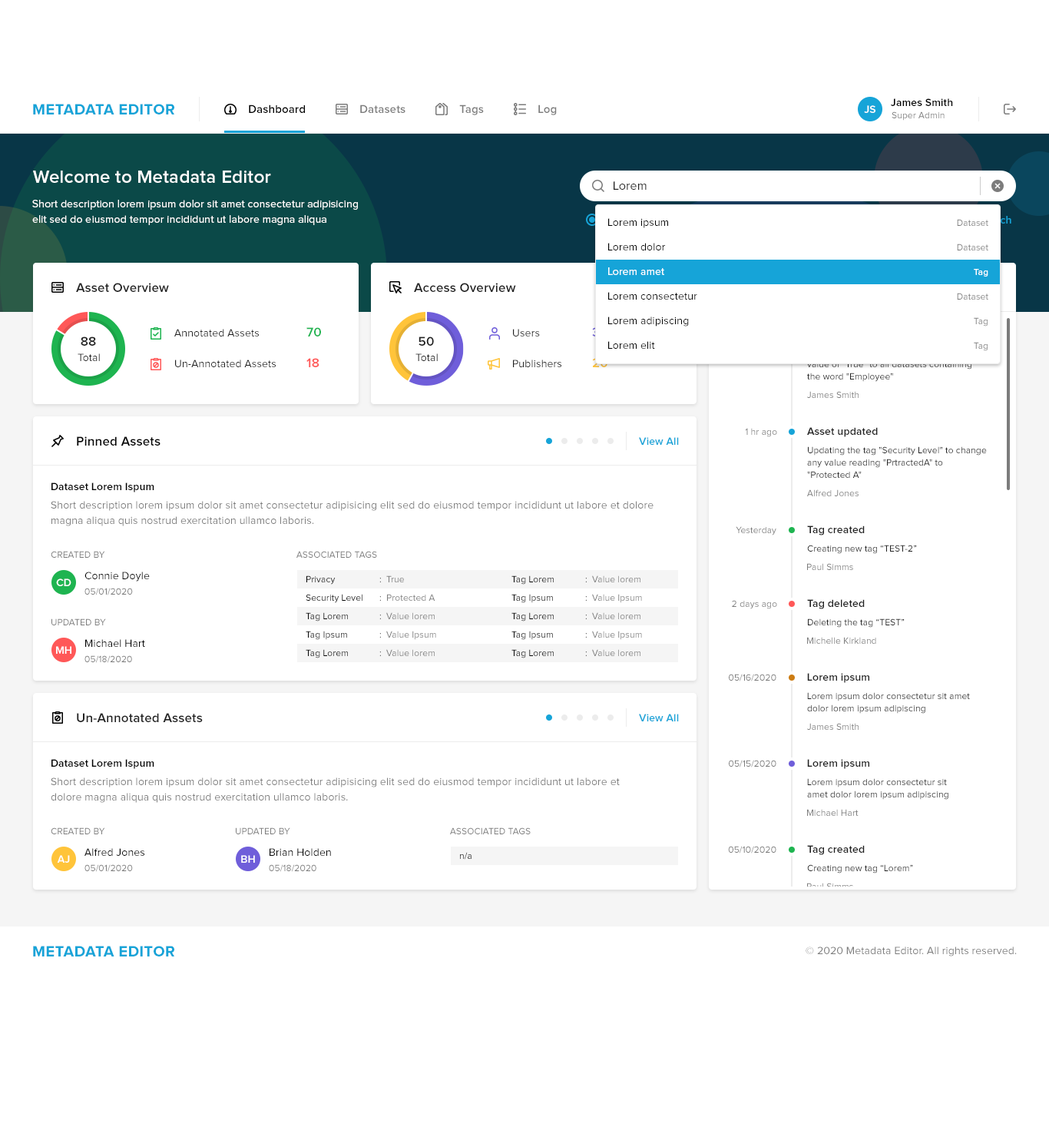
<style>
.page{position:relative;width:1049px;height:1137px;background:#ffffff}
.page>*{position:absolute;margin:0}
.t1{font:10.8px "ProximaNova-Semibold";letter-spacing:0.01em;color:#000000}
.t2{font:15.4px "ProximaNova-Bold";letter-spacing:0.025em;color:#16a4d8;text-transform:uppercase}
.t3{font:11.5px "ProximaNova-Semibold";letter-spacing:0.01em;color:#000000}
.t4{font:11.5px "ProximaNova-Semibold";letter-spacing:0.01em;color:#7c7c7c}
.t5{font:10.8px "ProximaNova-Semibold";letter-spacing:0.01em;color:#ffffff}
.t6{font:9.2px "ProximaNova-Regular";letter-spacing:0.01em;color:#7c7c7c}
.t7{font:18.4px "ProximaNova-Semibold";letter-spacing:0.01em;color:#ffffff}
.t8{font:12.3px "ProximaNova-Regular";letter-spacing:0.01em;color:#212121}
.t9{font:10.8px/15.4px "ProximaNova-Regular";letter-spacing:0.01em;color:#ffffff}
.t10{font:10.8px/24.6px "ProximaNova-Regular";letter-spacing:0.01em;color:#000000}
.t11{font:9.2px/24.6px "ProximaNova-Regular";letter-spacing:0.01em;color:#7c7c7c}
.t12{font:10.8px "ProximaNova-Regular";letter-spacing:0.01em;color:#ffffff}
.t13{font:9.2px "ProximaNova-Regular";letter-spacing:0.01em;color:#ffffff}
.t14{font:13.1px "ProximaNova-Semibold";letter-spacing:0.01em;color:#212121}
.t15{font:10.8px/30.7px "ProximaNova-Regular";letter-spacing:0.01em;color:#212121}
.t16{font:13.1px/30.7px "ProximaNova-Semibold";letter-spacing:0.01em;color:#1eb450}
.t17{font:13.1px/30.7px "ProximaNova-Semibold";letter-spacing:0.01em;color:#ff5858}
.t18{font:13.1px/30.7px "ProximaNova-Semibold";letter-spacing:0.01em;color:#ffffff}
.t19{font:10.8px "ProximaNova-Regular";letter-spacing:0.01em;color:#212121}
.t20{font:9.2px/12.3px "ProximaNova-Regular";letter-spacing:0.01em}
.t21{font:13.1px "ProximaNova-Semibold";letter-spacing:0.01em;color:#000000}
.t22{font:10.8px "ProximaNova-Semibold";letter-spacing:0.01em;color:#16a4d8}
.t23{font:10.8px "ProximaNova-Semibold";letter-spacing:0.01em;color:#212121}
.t24{font:9.2px/12.3px "ProximaNova-Regular";letter-spacing:0.01em;color:#212121}
.t25{font:10.8px/15.4px "ProximaNova-Regular";letter-spacing:0.01em;color:#7c7c7c}
.t26{font:9.2px "ProximaNova-Regular";letter-spacing:0.01em;color:#212121}
.t27{font:9.2px "ProximaNova-Regular";letter-spacing:0.01em;color:#7c7c7c;text-transform:uppercase}
.t28{font:10.8px "ProximaNova-Semibold";letter-spacing:0.01em;color:#ffffff;text-transform:uppercase}
.t29{font:10.8px "ProximaNova-Regular";letter-spacing:0.01em;color:#000000}
.t30{font:9.2px/18.4px "ProximaNova-Regular";letter-spacing:0.01em;color:#000000}
.t31{font:9.2px/18.4px "ProximaNova-Regular";letter-spacing:0.01em}
.t32{font:9.2px/18.4px "ProximaNova-Regular";letter-spacing:0.01em;color:#7c7c7c}
.t33{font:9.2px "ProximaNova-Regular";letter-spacing:0.01em}
.t34{font:10.8px "ProximaNova-Regular";letter-spacing:0.01em;color:#7c7c7c}
</style>
<div class="page">
<p class="t1" style="left:891px;top:98px;width:62px;height:8px">James Smith</p>
<p class="t2" style="left:33px;top:104px;width:141px;height:10px">Metadata Editor</p>
<p class="t3" style="left:249px;top:104px;width:56px;height:9px">Dashboard</p>
<p class="t4" style="left:360px;top:104px;width:46px;height:9px">Datasets</p>
<p class="t4" style="left:459px;top:104px;width:25px;height:11px">Tags</p>
<p class="t4" style="left:538px;top:104px;width:19px;height:11px">Log</p>
<p class="t5" style="left:864px;top:105px;width:12px;height:8px">JS</p>
<p class="t6" style="left:892px;top:111px;width:53px;height:10px">Super Admin</p>
<p class="t7" style="left:33px;top:170px;width:238px;height:13px">Welcome to Metadata Editor</p>
<p class="t8" style="left:614px;top:181px;width:33px;height:9px">Lorem</p>
<p class="t9" style="left:32px;top:200px;width:326px;height:25px">Short description lorem ipsum dolor sit amet consectetur adipisicing <br>elit sed do eiusmod tempor incididunt ut labore magna aliqua</p>
<p class="t10" style="left:608px;top:218px;width:89px;height:131px">Lorem ipsum<br>Lorem dolor<br>Lorem amet<br>Lorem consectetur<br>Lorem adipiscing<br>Lorem elit</p>
<p class="t11" style="left:957px;top:219px;width:31px;height:132px;text-align:right">Dataset<br>Dataset<br>Tag<br>Dataset<br>Tag<br>Tag</p>
<p class="t12" style="left:608px;top:267px;width:56px;height:8px">Lorem amet</p>
<p class="t13" style="left:974px;top:269px;width:14px;height:7px">Tag</p>
<p class="t14" style="left:76px;top:283px;width:93px;height:9px">Asset Overview</p>
<p class="t14" style="left:414px;top:283px;width:102px;height:9px">Access Overview</p>
<p class="t15" style="left:174px;top:329px;width:102px;height:38px">Annotated Assets<br>Un-Annotated Assets</p>
<p class="t16" style="left:306px;top:327px;width:15px;height:40px">70<br><span class="t17">18</span></p>
<p class="t15" style="left:513px;top:329px;width:48px;height:38px">Users<br>Publishers</p>
<p class="t18" style="left:592px;top:327px;width:15px;height:40px">30<br>20</p>
<p class="t14" style="left:81px;top:336px;width:15px;height:10px">88</p>
<p class="t14" style="left:419px;top:336px;width:15px;height:10px">50</p>
<p class="t19" style="left:78px;top:353px;width:22px;height:8px">Total</p>
<p class="t19" style="left:415px;top:353px;width:23px;height:8px">Total</p>
<p class="t20" style="left:807px;top:348px;width:169px;height:34px">Applied tag type called "Privacy" with the <br>value of "True" to all datasets containing <br>the word "Employee"</p>
<p class="t6" style="left:807px;top:391px;width:52px;height:7px">James Smith</p>
<p class="t21" style="left:77px;top:436px;width:84px;height:9px">Pinned Assets</p>
<p class="t22" style="left:639px;top:437px;width:40px;height:8px">View All</p>
<p class="t6" style="left:745px;top:428px;width:32px;height:9px">1 hr ago</p>
<p class="t23" style="left:807px;top:427px;width:71px;height:10px">Asset updated</p>
<p class="t24" style="left:807px;top:446px;width:180px;height:32px">Updating the tag "Security Level" to change <br>any value reading "PrtractedA" to <br>"Protected A"</p>
<p class="t1" style="left:51px;top:482px;width:103px;height:10px">Dataset Lorem Ispum</p>
<p class="t6" style="left:807px;top:489px;width:52px;height:7px">Alfred Jones</p>
<p class="t25" style="left:51px;top:501px;width:603px;height:25px">Short description lorem ipsum dolor sit amet consectetur adipisicing elit sed do eiusmod tempor incididunt ut labore et dolore <br>magna aliqua quis nostrud exercitation ullamco laboris.</p>
<p class="t6" style="left:736px;top:526px;width:40px;height:9px">Yesterday</p>
<p class="t23" style="left:807px;top:525px;width:58px;height:10px">Tag created</p>
<p class="t26" style="left:807px;top:545px;width:110px;height:9px">Creating new tag “TEST-2”</p>
<p class="t27" style="left:51px;top:551px;width:54px;height:7px">Created by</p>
<p class="t27" style="left:296px;top:551px;width:81px;height:7px">Associated tags</p>
<p class="t6" style="left:807px;top:563px;width:46px;height:7px">Paul Simms</p>
<p class="t28" style="left:56px;top:578px;width:15px;height:8px">cd</p>
<p class="t29" style="left:84px;top:571px;width:66px;height:10px">Connie Doyle</p>
<p class="t30" style="left:306px;top:575px;width:56px;height:83px">Privacy<br>Security Level<br>Tag Lorem<br>Tag Ipsum<br>Tag Lorem</p>
<p class="t31" style="left:379px;top:578px;width:2px;height:78px">:<br>:<br>:<br>:<br>:</p>
<p class="t32" style="left:386px;top:575px;width:50px;height:81px">True<br>Protected A<br>Value lorem<br>Value Ipsum<br>Value lorem</p>
<p class="t30" style="left:511px;top:575px;width:43px;height:83px">Tag Lorem<br>Tag Ipsum<br>Tag Lorem<br>Tag Ipsum<br>Tag Lorem</p>
<p class="t31" style="left:585px;top:578px;width:2px;height:78px">:<br>:<br>:<br>:<br>:</p>
<p class="t32" style="left:592px;top:575px;width:50px;height:81px">Value lorem<br>Value Ipsum<br>Value lorem<br>Value Ipsum<br>Value lorem</p>
<p class="t6" style="left:84px;top:588px;width:49px;height:7px">05/01/2020</p>
<p class="t6" style="left:732px;top:600px;width:45px;height:9px">2 days ago</p>
<p class="t23" style="left:807px;top:599px;width:58px;height:10px">Tag deleted</p>
<p class="t27" style="left:51px;top:618px;width:55px;height:7px">Updated by</p>
<p class="t26" style="left:808px;top:618px;width:97px;height:9px">Deleting the tag “TEST”</p>
<p class="t29" style="left:85px;top:639px;width:60px;height:8px">Michael Hart</p>
<p class="t6" style="left:807px;top:637px;width:69px;height:7px">Michelle Kirkland</p>
<p class="t28" style="left:56px;top:646px;width:15px;height:8px">mh</p>
<p class="t6" style="left:84px;top:655px;width:48px;height:8px">05/18/2020</p>
<p class="t6" style="left:729px;top:674px;width:47px;height:7px">05/16/2020</p>
<p class="t23" style="left:807px;top:673px;width:62px;height:10px">Lorem ipsum</p>
<p class="t24" style="left:807px;top:692px;width:163px;height:21px">Lorem ipsum dolor consectetur sit amet <br>dolor lorem ipsum adipiscing</p>
<p class="t14" style="left:77px;top:713px;width:126px;height:9px">Un-Annotated Assets</p>
<p class="t22" style="left:639px;top:713px;width:40px;height:8px">View All</p>
<p class="t6" style="left:807px;top:723px;width:52px;height:7px">James Smith</p>
<p class="t1" style="left:51px;top:759px;width:103px;height:10px">Dataset Lorem Ispum</p>
<p class="t6" style="left:729px;top:760px;width:47px;height:7px">05/15/2020</p>
<p class="t23" style="left:807px;top:759px;width:62px;height:10px">Lorem ipsum</p>
<p class="t25" style="left:51px;top:777px;width:569px;height:26px">Short description lorem ipsum dolor sit amet consectetur adipisicing elit sed do eiusmod tempor incididunt ut labore et <br>dolore magna aliqua quis nostrud exercitation ullamco laboris.</p>
<p class="t24" style="left:807px;top:778px;width:141px;height:21px">Lorem ipsum dolor consectetur sit <br>amet dolor lorem ipsum adipiscing</p>
<p class="t6" style="left:807px;top:809px;width:52px;height:7px">Michael Hart</p>
<p class="t27" style="left:51px;top:827px;width:54px;height:7px">Created by</p>
<p class="t27" style="left:236px;top:827px;width:54px;height:7px">Updated by</p>
<p class="t27" style="left:450px;top:827px;width:81px;height:7px">Associated tags</p>
<p class="t6" style="left:728px;top:846px;width:48px;height:7px">05/10/2020</p>
<p class="t23" style="left:807px;top:845px;width:58px;height:10px">Tag created</p>
<p class="t28" style="left:57px;top:855px;width:13px;height:7px">aj</p>
<p class="t29" style="left:84px;top:848px;width:60px;height:8px">Alfred Jones</p>
<p class="t28" style="left:241px;top:855px;width:14px;height:7px">bh</p>
<p class="t29" style="left:270px;top:848px;width:61px;height:8px">Brian Holden</p>
<p class="t33" style="left:460px;top:852px;width:12px;height:7px">n/a</p>
<p class="t6" style="left:84px;top:864px;width:49px;height:8px">05/01/2020</p>
<p class="t6" style="left:269px;top:864px;width:47px;height:8px">05/18/2020</p>
<p class="t26" style="left:807px;top:864px;width:106px;height:9px">Creating new tag “Lorem”</p>
<p class="t33" style="left:807px;top:882px;width:46px;height:7px">Paul Simms</p>
<p class="t2" style="left:33px;top:945px;width:141px;height:11px">Metadata Editor</p>
<p class="t34" style="left:806px;top:946px;width:211px;height:10px">© 2020 Metadata Editor. All rights reserved.</p>
</div>
